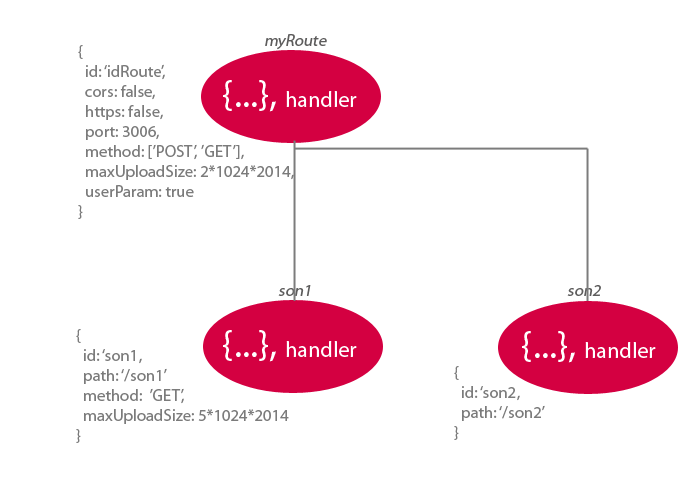
<style>
.page{position:relative;width:700px;height:478px;background:#ffffff}
.page>*{position:absolute;margin:0}
.t1{font:16.7px "MyriadPro-Regular";color:#5d5c5c;font-style:italic}
.t2{font:16.7px "MyriadPro-Regular";color:#7b7b7b}
.t3{font:22.2px "MyriadPro-Regular";color:#ffffff}
.t4{font:38.9px "MyriadPro-Regular";color:#ffffff}
</style>
<div class="page">
<p class="t1" style="left:265px;top:34px;width:62px;height:16px">myRoute</p>
<p class="t2" style="left:78px;top:45px;width:216px;height:174px">{<br>  id: ‘idRoute’,<br>  cors: false,<br>  https: false,<br>  port: 3006,<br>  method: [’POST’, ’GET’],<br>  maxUploadSize: 2*1024*2014,<br>  userParam: true<br>}</p>
<p class="t3" style="left:223px;top:80px;width:134px;height:32px"><span class="t4">{...}, </span>handler</p>
<p class="t1" style="left:278px;top:285px;width:33px;height:11px">son1</p>
<p class="t1" style="left:567px;top:285px;width:34px;height:11px">son2</p>
<p class="t2" style="left:76px;top:329px;width:213px;height:114px">{<br>  id: ‘son1,<br>  path: ‘/son1’<br>  method:  ’GET’,<br>  maxUploadSize: 5*1024*2014<br>}</p>
<p class="t3" style="left:223px;top:330px;width:134px;height:32px"><span class="t4">{...}, </span>handler</p>
<p class="t3" style="left:522px;top:331px;width:134px;height:32px"><span class="t4">{...}, </span>handler</p>
<p class="t2" style="left:454px;top:366px;width:91px;height:74px">{<br>  id: ‘son2,<br>  path: ‘/son2’<br>}</p>
</div>
